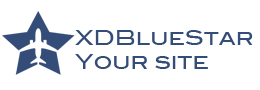
<style>
.page{position:relative;width:260px;height:90px;background:#ffffff}
.page>*{position:absolute;margin:0}
.t1{font:20px/24px "BlairMdITCTTMedium";color:#334c78}
</style>
<div class="page">
<p class="t1" style="left:75px;top:30px;width:178px;height:39px">XDBlueStar<br>Your site</p>
</div>
